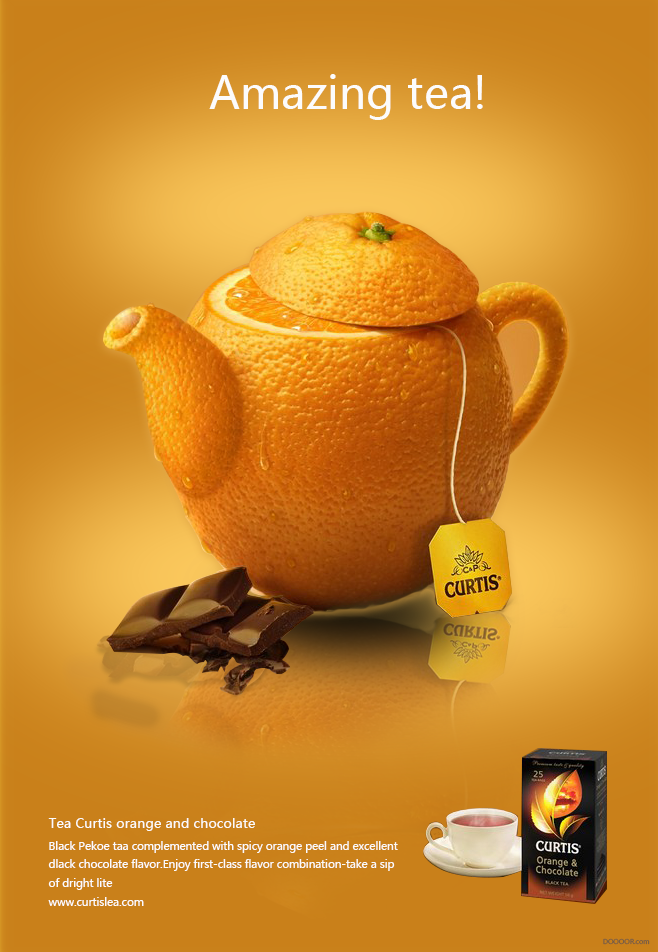
<style>
.page{position:relative;width:658px;height:952px}
.page>*{position:absolute;margin:0}
.t1{font:44px "MicrosoftYaHei";color:#fcfcfc}
.t2{font:13.3px "MicrosoftYaHei";color:#fcfcfc}
.t3{font:10.7px "MicrosoftYaHei";color:#fcfcfc}
.t4{font:6.7px "MicrosoftYaHei";color:#765c43}
</style>
<div class="page">
<p class="t1" style="left:209px;top:74px;width:274px;height:46px">Amazing tea!</p>
<p class="t2" style="left:48px;top:818px;width:207px;height:13px">Tea Curtis orange and chocolate</p>
<p class="t3" style="left:48px;top:841px;width:350px;height:65px">Black Pekoe taa complemented with spicy orange peel and excellent<br>dlack chocolate flavor.Enjoy first-class flavor combination-take a sip<br>of dright lite<br>www.curtislea.com</p>
<p class="t4" style="left:603px;top:938px;width:47px;height:7px">DOOOOR.com</p>
</div>
